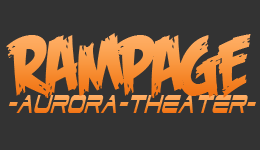
<style>
.page{position:relative;width:260px;height:150px;background:#333333}
.page>*{position:absolute;margin:0}
.t1{font:84.6px "FeastofFleshBB";scale:0.87 1}
.t2{font:31.6px "DodgerCondensedItalic";scale:0.63 1}
</style>
<div class="page">
<p class="t1" style="left:6px;top:33px;width:245px;height:65px">RAMPAGE</p>
<p class="t2" style="left:8px;top:95px;width:248px;height:18px">-AURORA-THEATER-</p>
</div>
